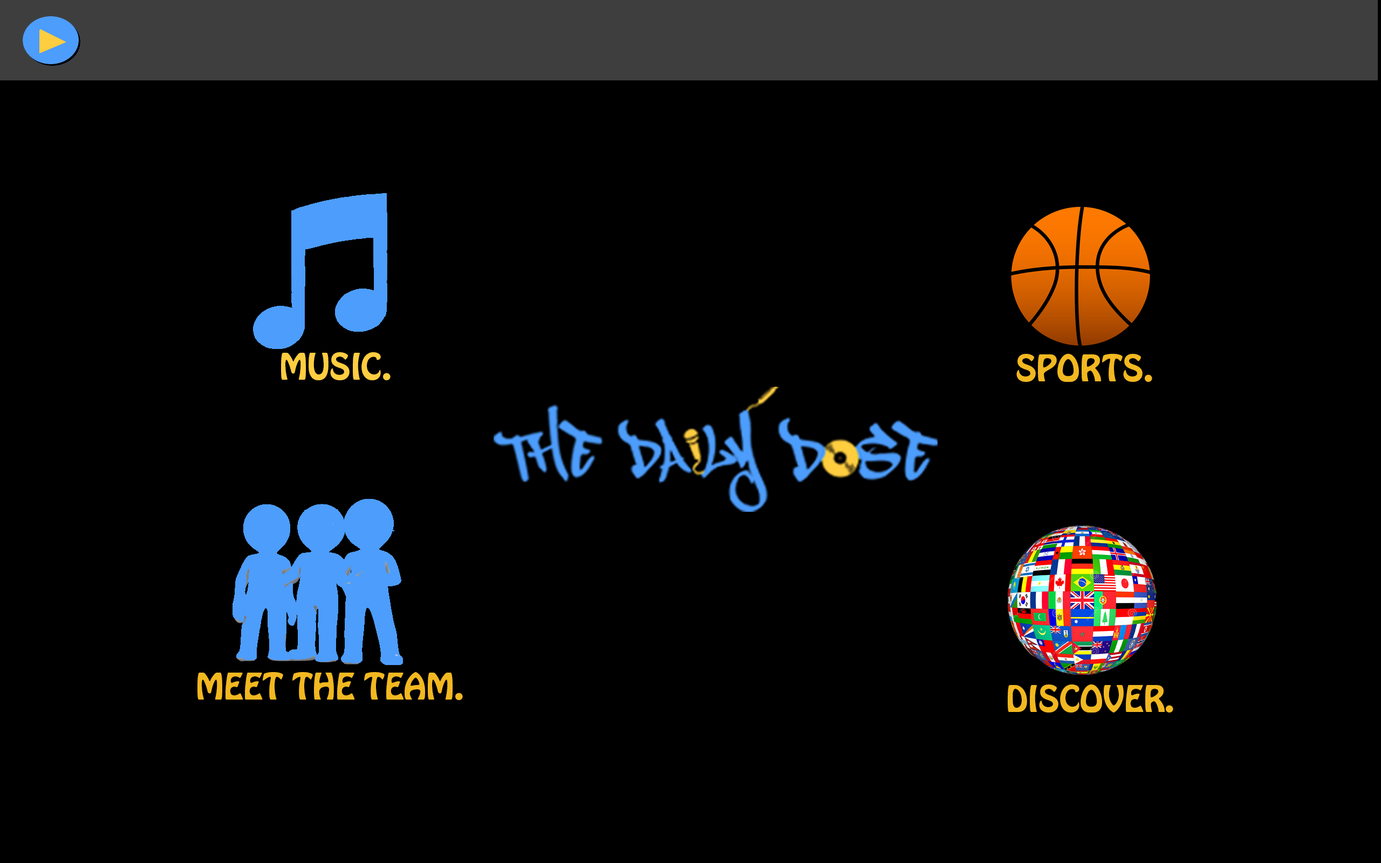
<style>
.page{position:relative;width:1381px;height:863px;background:#000000}
.page>*{position:absolute;margin:0}
.t1{font:32.4px "HoboStd";color:#fecd40}
.t2{font:32.4px "HoboStd";color:#f2b821}
</style>
<div class="page">
<p class="t1" style="left:281px;top:352px;width:110px;height:28px">MUSIC.</p>
<p class="t2" style="left:1017px;top:354px;width:135px;height:28px">SPORTS.</p>
<p class="t2" style="left:197px;top:672px;width:266px;height:28px">MEET THE TEAM.</p>
<p class="t2" style="left:1008px;top:685px;width:166px;height:28px">DISCOVER.</p>
</div>
